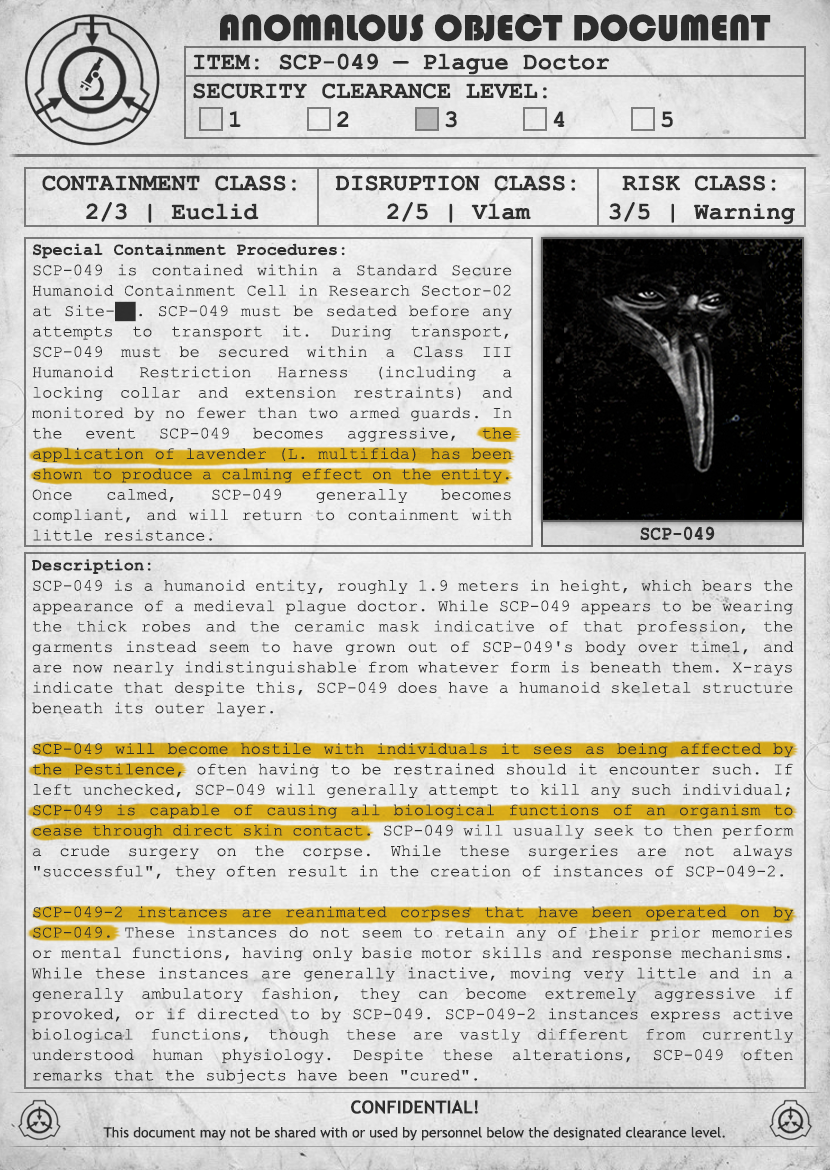
<style>
.page{position:relative;width:830px;height:1170px}
.page>*{position:absolute;margin:0}
.t1{font:38px "Bauhaus93";color:#333333;text-transform:uppercase}
.t2{font:24px "CourierNewPS-BoldMT";color:#333333}
.t3{font:24px "CourierNewPS-BoldMT";color:#333333;text-transform:uppercase}
.t4{font:17px "CourierNewPSMT";color:#333333}
.t5{font:17px "CourierNewPS-BoldMT";color:#333333}
.t6{font:20.1px "CourierNewPS-BoldMT";color:#333333;scale:0.9 1}
.t7{font:14px/24px "TrebuchetMS";color:#333333}
.t8{font:18px/24px "TrebuchetMS-Bold";color:#333333}
</style>
<div class="page">
<p class="t1" style="left:220px;top:14px;width:551px;height:28px">anomalous object document</p>
<p class="t2" style="left:193px;top:53px;width:480px;height:75px">ITEM: SCP-049 — Plague Doctor<br><span class="t3">Security CLEARANCE LEVEL:</span> <br> 1   2   3   4   5</p>
<p class="t2" style="left:42px;top:175px;width:254px;height:48px;text-align:center">CONTAINMENT CLASS:<br>2/3 | Euclid</p>
<p class="t2" style="left:335px;top:175px;width:241px;height:48px;text-align:center">DISRUPTION CLASS:<br>2/5 | Vlam</p>
<p class="t2" style="left:609px;top:175px;width:186px;height:50px;text-align:center">RISK CLASS:<br>3/5 | Warning</p>
<p class="t4" style="left:32px;top:243px;width:481px;height:298px;text-align:justify"><span class="t5">Special Containment Procedures:<br></span>SCP-049 is contained within a Standard Secure Humanoid Containment Cell in Research Sector-02 at Site-██. SCP-049 must be sedated before any attempts to transport it. During transport, SCP-049 must be secured within a Class III Humanoid Restriction Harness (including a locking collar and extension restraints) and monitored by no fewer than two armed guards. In the event SCP-049 becomes aggressive, the application of lavender (L. multifida) has been shown to produce a calming effect on the entity. Once calmed, SCP-049 generally becomes compliant, and will return to containment with little resistance.</p>
<p class="t6" style="left:640px;top:526px;width:75px;height:15px">SCP-049</p>
<p class="t4" style="left:32px;top:559px;width:762px;height:525px;text-align:justify"><span class="t5">Description:<br></span>SCP-049 is a humanoid entity, roughly 1.9 meters in height, which bears the appearance of a medieval plague doctor. While SCP-049 appears to be wearing the thick robes and the ceramic mask indicative of that profession, the garments instead seem to have grown out of SCP-049's body over time1, and are now nearly indistinguishable from whatever form is beneath them. X-rays indicate that despite this, SCP-049 does have a humanoid skeletal structure beneath its outer layer.<br><br>SCP-049 will become hostile with individuals it sees as being affected by the Pestilence, often having to be restrained should it encounter such. If left unchecked, SCP-049 will generally attempt to kill any such individual; SCP-049 is capable of causing all biological functions of an organism to cease through direct skin contact. SCP-049 will usually seek to then perform a crude surgery on the corpse. While these surgeries are not always "successful", they often result in the creation of instances of SCP-049-2.<br><br>SCP-049-2 instances are reanimated corpses that have been operated on by SCP-049. These instances do not seem to retain any of their prior memories or mental functions, having only basic motor skills and response mechanisms. While these instances are generally inactive, moving very little and in a generally ambulatory fashion, they can become extremely aggressive if provoked, or if directed to by SCP-049. SCP-049-2 instances express active biological functions, though these are vastly different from currently understood human physiology. Despite these alterations, SCP-049 often remarks that the subjects have been "cured".</p>
<p class="t7" style="left:103px;top:1100px;width:622px;height:41px;text-align:center"><span class="t8">CONFIDENTIAL!<br></span>This document may not be shared with or used by personnel below the designated clearance level.</p>
</div>
